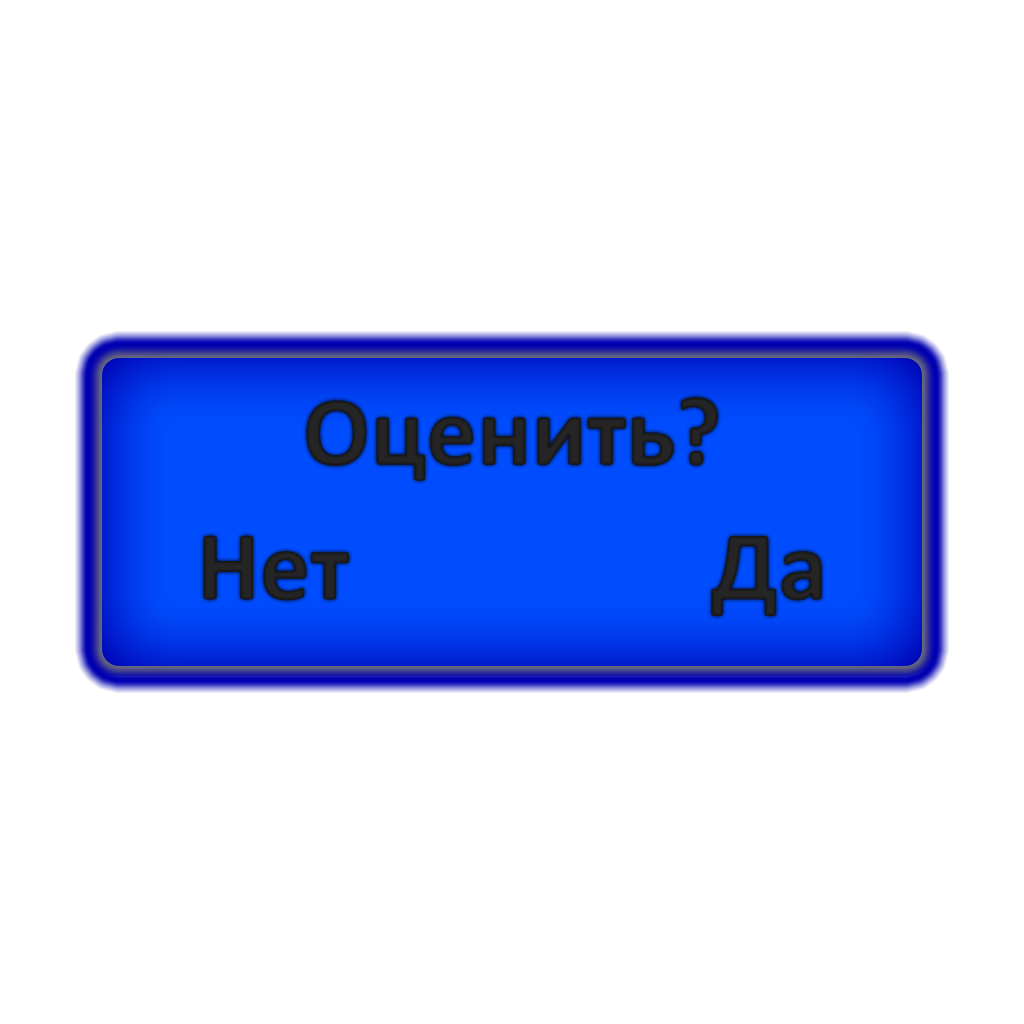
<style>
.page{position:relative;width:1024px;height:1024px;background:#ffffff}
.page>*{position:absolute;margin:0}
.t1{font:100px "Calibri-Bold";color:#232323}
</style>
<div class="page">
<p class="t1" style="left:306px;top:397px;width:412px;height:84px">Оценить?</p>
<p class="t1" style="left:203px;top:535px;width:619px;height:81px">Нет                Да</p>
</div>
